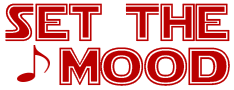
<style>
.page{position:relative;width:234px;height:90px;background:#ffffff}
.page>*{position:absolute;margin:0}
.t1{font:52.9px "StarJediOutline";color:#ba0000}
</style>
<div class="page">
<p class="t1" style="left:5px;top:3px;width:225px;height:39px">Set The</p>
<p class="t1" style="left:59px;top:47px;width:171px;height:39px">mood</p>
</div>
